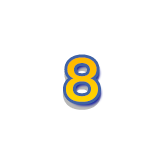
<style>
.page{position:relative;width:164px;height:164px;background:#ffffff}
.page>*{position:absolute;margin:0}
.t1{font:59.8px "PingFangHK-Semibold";color:#ffc600;text-transform:uppercase}
</style>
<div class="page">
<p class="t1" style="left:66px;top:57px;width:32px;height:45px">8</p>
</div>
